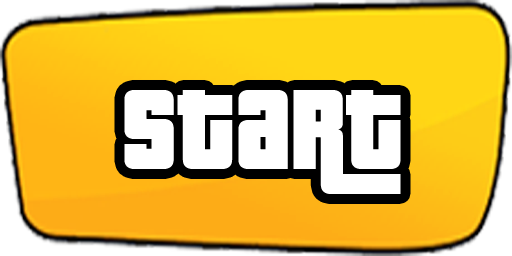
<style>
.page{position:relative;width:512px;height:256px;background:#ffffff}
.page>*{position:absolute;margin:0}
.t1{font:124.5px "PricedownBl-Regular";letter-spacing:0.012em;color:#ffffff;scale:0.84 1}
</style>
<div class="page">
<p class="t1" style="left:124px;top:90px;width:277px;height:104px">Start</p>
</div>
